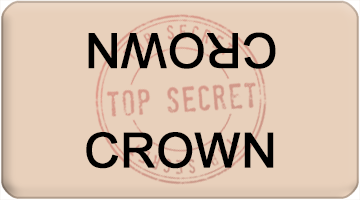
<style>
.page{position:relative;width:360px;height:200px;background:#e8d0bb}
.page>*{position:absolute;margin:0}
.t1{font:48px "ArialMT";color:#000000;font-weight:bold}
</style>
<div class="page">
<p class="t1" style="left:88px;top:32px;width:188px;height:37px;rotate:180deg">CROWN</p>
<p class="t1" style="left:86px;top:132px;width:188px;height:37px">CROWN</p>
</div>
